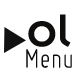
<style>
.page{position:relative;width:80px;height:80px;background:#ffffff}
.page>*{position:absolute;margin:0}
.t1{font:50px "Insignia";color:#100d0d}
.t2{font:30px "Miso-Light";color:#100d0d}
</style>
<div class="page">
<p class="t1" style="left:28px;top:14px;width:43px;height:33px">ol</p>
<p class="t2" style="left:26px;top:49px;width:46px;height:19px">Menu</p>
</div>
